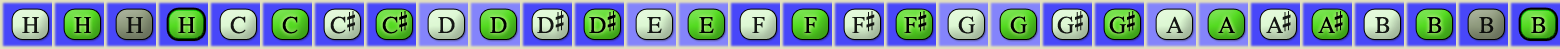
<style>
.page{position:relative;width:1560px;height:49px}
.page>*{position:absolute;margin:0}
.t1{font:24px "OpusChords";color:#000000}
.t2{font:24px "OpusChords";letter-spacing:-0.025em;color:#000000}
.t3{font:24px "OpusChords";letter-spacing:-0.1em;color:#000000}
</style>
<div class="page">
<p class="t1" style="left:22px;top:17px;width:17px;height:16px;opacity:0.9">H</p>
<p class="t1" style="left:74px;top:17px;width:17px;height:16px">H</p>
<p class="t1" style="left:126px;top:17px;width:17px;height:16px;opacity:0.9">H</p>
<p class="t1" style="left:178px;top:17px;width:17px;height:16px">H</p>
<p class="t1" style="left:230px;top:16px;width:16px;height:18px;opacity:0.9">C</p>
<p class="t1" style="left:282px;top:16px;width:16px;height:18px">C</p>
<p class="t1" style="left:330px;top:11px;width:25px;height:23px;opacity:0.9">C#</p>
<p class="t1" style="left:382px;top:11px;width:25px;height:23px">C#</p>
<p class="t1" style="left:438px;top:17px;width:17px;height:16px;opacity:0.9">D</p>
<p class="t1" style="left:490px;top:17px;width:17px;height:16px">D</p>
<p class="t1" style="left:537px;top:11px;width:27px;height:22px;opacity:0.9">D#</p>
<p class="t1" style="left:589px;top:11px;width:27px;height:22px">D#</p>
<p class="t1" style="left:647px;top:17px;width:15px;height:16px;opacity:0.9">E</p>
<p class="t1" style="left:699px;top:17px;width:15px;height:16px">E</p>
<p class="t1" style="left:752px;top:17px;width:13px;height:16px;opacity:0.9">F</p>
<p class="t1" style="left:804px;top:17px;width:13px;height:16px">F</p>
<p class="t1" style="left:852px;top:11px;width:23px;height:22px;opacity:0.9">F#</p>
<p class="t1" style="left:904px;top:11px;width:23px;height:22px">F#</p>
<p class="t1" style="left:958px;top:16px;width:17px;height:18px;opacity:0.9">G</p>
<p class="t1" style="left:1010px;top:16px;width:17px;height:18px">G</p>
<p class="t2" style="left:1057px;top:11px;width:26px;height:23px;opacity:0.9">G#</p>
<p class="t2" style="left:1109px;top:11px;width:26px;height:23px">G#</p>
<p class="t1" style="left:1166px;top:16px;width:17px;height:17px;opacity:0.9">A</p>
<p class="t1" style="left:1218px;top:16px;width:17px;height:17px">A</p>
<p class="t3" style="left:1266px;top:11px;width:25px;height:22px;opacity:0.9">A#</p>
<p class="t3" style="left:1318px;top:11px;width:25px;height:22px">A#</p>
<p class="t1" style="left:1375px;top:17px;width:15px;height:16px;opacity:0.9">B</p>
<p class="t1" style="left:1427px;top:17px;width:15px;height:16px">B</p>
<p class="t1" style="left:1479px;top:17px;width:15px;height:16px;opacity:0.9">B</p>
<p class="t1" style="left:1531px;top:17px;width:15px;height:16px">B</p>
</div>
